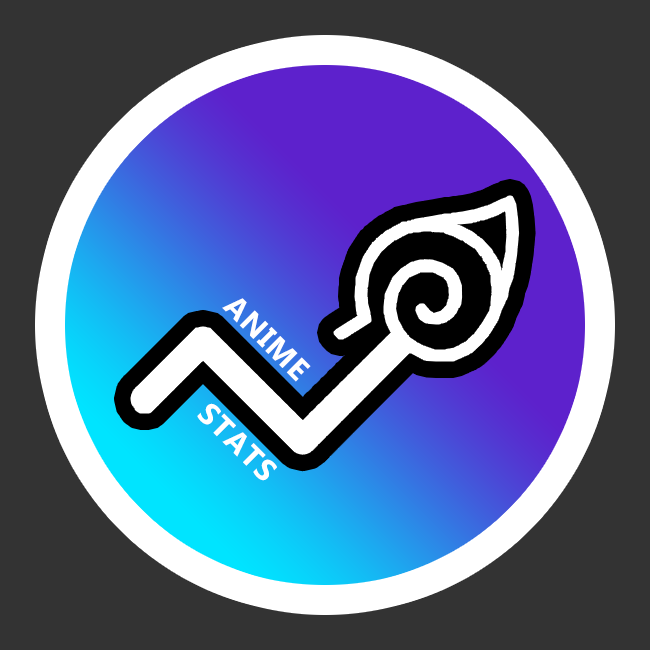
<style>
.page{position:relative;width:650px;height:650px;background:#333333}
.page>*{position:absolute;margin:0}
.t1{font:30.5px "LaoUI-Bold";letter-spacing:0.04em;color:#ffffff}
</style>
<div class="page">
<p class="t1" style="left:222px;top:298px;width:89px;height:84px;rotate:45deg">ANIME</p>
<p class="t1" style="left:197px;top:403px;width:80px;height:78px;rotate:45deg">STATS</p>
</div>
